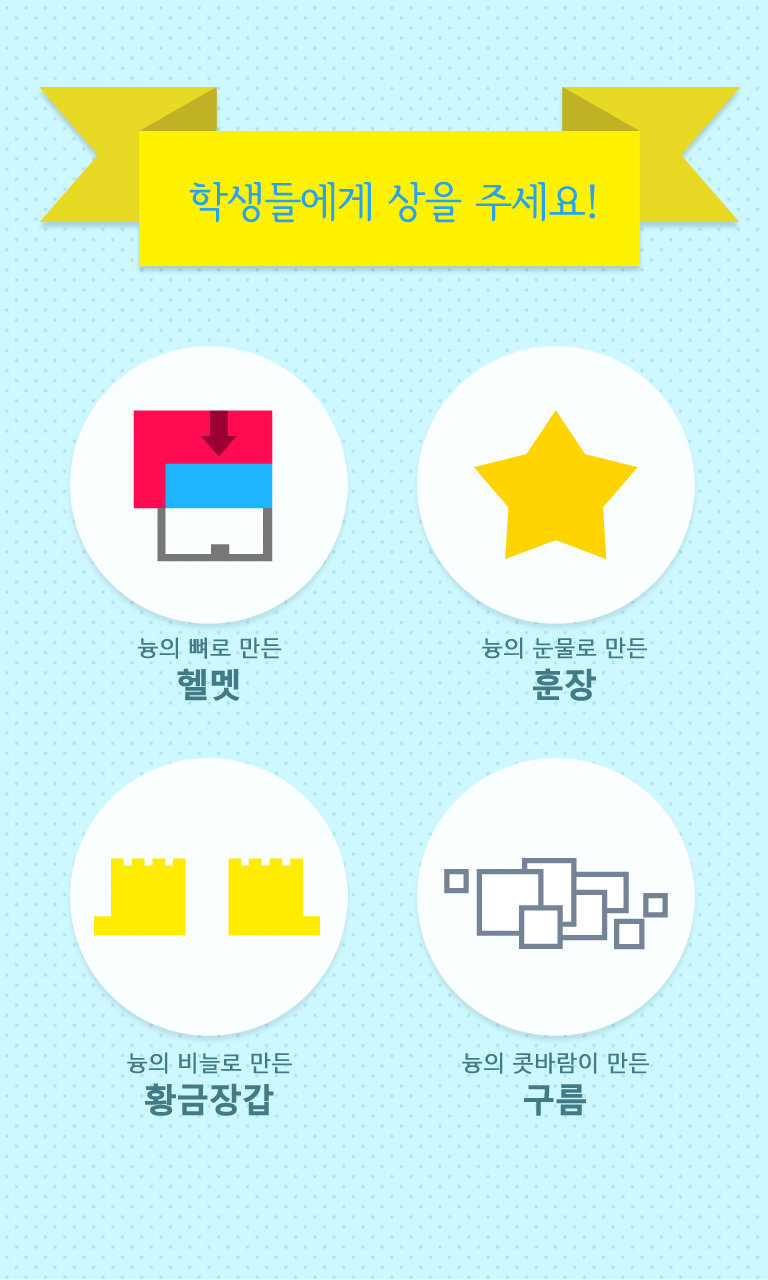
<style>
.page{position:relative;width:768px;height:1280px;background:#cdf8ff}
.page>*{position:absolute;margin:0}
.t1{font:42.2px "SeoulHangangL";letter-spacing:-0.05em;color:#27a2ef;font-weight:bold}
.t2{font:22.2px/31.1px "MalgunGothicRegular";letter-spacing:-0.05em;color:#437b85;font-weight:bold}
.t3{font:33.3px/31.1px "MalgunGothicBold";letter-spacing:-0.05em;color:#437b85;font-weight:bold}
</style>
<div class="page">
<p class="t1" style="left:189px;top:181px;width:406px;height:42px">학생들에게 상을 주세요!</p>
<p class="t2" style="left:138px;top:637px;width:144px;height:64px;text-align:center">늉의 뼈로 만든<br><span class="t3">헬멧</span></p>
<p class="t2" style="left:482px;top:637px;width:165px;height:64px;text-align:center">늉의 눈물로 만든<br><span class="t3">훈장</span></p>
<p class="t2" style="left:127px;top:1052px;width:165px;height:64px;text-align:center">늉의 비늘로 만든<br><span class="t3">황금장갑</span></p>
<p class="t2" style="left:462px;top:1052px;width:187px;height:64px;text-align:center">늉의 콧바람이 만든<br><span class="t3">구름</span></p>
</div>
